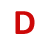
<style>
.page{position:relative;width:48px;height:48px;background:#ffffff}
.page>*{position:absolute;margin:0}
.t1{font:36px "Calibri-Bold";color:#cd0808}
.t2{font:14px "Calibri-Bold";color:#ffffff}
</style>
<div class="page">
<p class="t1" style="left:15px;top:11px;width:20px;height:23px"><span class="t2">     </span>D</p>
</div>
